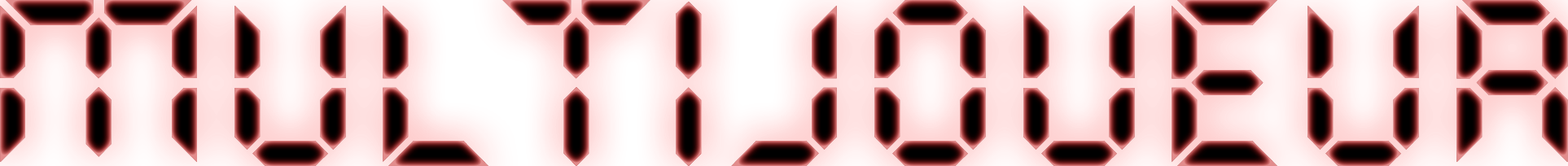
<style>
.page{position:relative;width:1568px;height:166px}
.page>*{position:absolute;margin:0}
.t1{font:237.5px "QuartzMS"}
</style>
<div class="page">
<p class="t1" style="left:0px;top:0px;width:1568px;height:166px">MULTIJOUEUR</p>
<p class="t1" style="left:0px;top:0px;width:1568px;height:166px">Multijoueur</p>
</div>
